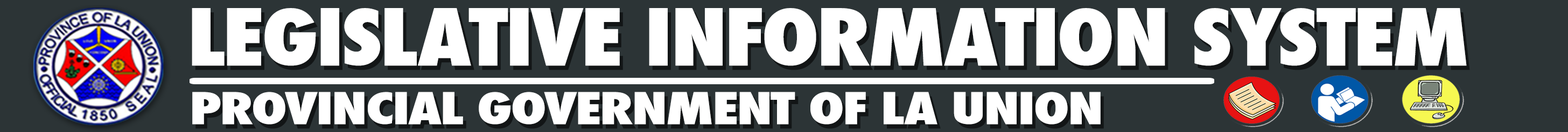
<style>
.page{position:relative;width:1568px;height:132px;background:#2c3436}
.page>*{position:absolute;margin:0}
.t1{font:76.3px "Futura-CondensedExtraBold";letter-spacing:-0.028em;color:#ffffff;scale:1.18 1}
.t2{font:42.6px "Futura-CondensedExtraBold";letter-spacing:-0.028em;color:#ffffff;scale:1.31 1}
</style>
<div class="page">
<p class="t1" style="left:192px;top:8px;width:1275px;height:58px">LEGISLATIVE INFORMATION SYSTEM</p>
<p class="t2" style="left:192px;top:92px;width:909px;height:33px">PROVINCIAL GOVERNMENT OF LA UNION</p>
</div>
